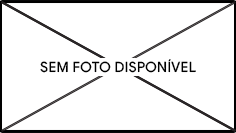
<style>
.page{position:relative;width:236px;height:133px;background:#ffffff}
.page>*{position:absolute;margin:0}
.t1{font:14.2px "GoogleSans-Medium";color:#000000}
</style>
<div class="page">
<p class="t1" style="left:40px;top:59px;width:156px;height:14px">SEM FOTO DISPONÍVEL</p>
</div>
